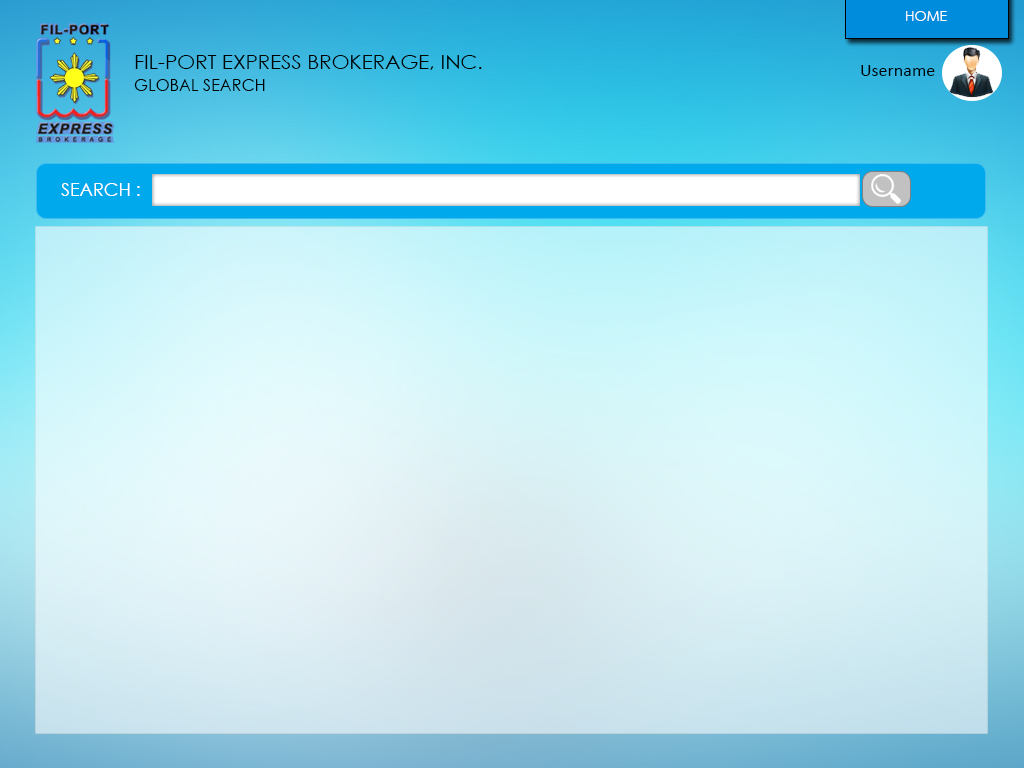
<style>
.page{position:relative;width:1024px;height:768px}
.page>*{position:absolute;margin:0}
.t1{font:20.3px "CenturyGothic";color:#000000;text-transform:uppercase}
.t2{font:18px/30.5px "Calibri";color:#000000}
.t3{font:16px "CenturyGothic";color:#000000;text-transform:uppercase}
.t4{font:18px "CenturyGothic";color:#ffffff;text-transform:uppercase}
</style>
<div class="page">
<p class="t1" style="left:135px;top:55px;width:347px;height:15px">FIL-PORT EXPRESS BROKERAGE, INC.</p>
<p class="t2" style="left:861px;top:65px;width:74px;height:11px">Username<br>vvvvv</p>
<p class="t3" style="left:134px;top:79px;width:131px;height:12px">global search</p>
<p class="t4" style="left:61px;top:183px;width:79px;height:13px">search :</p>
</div>
